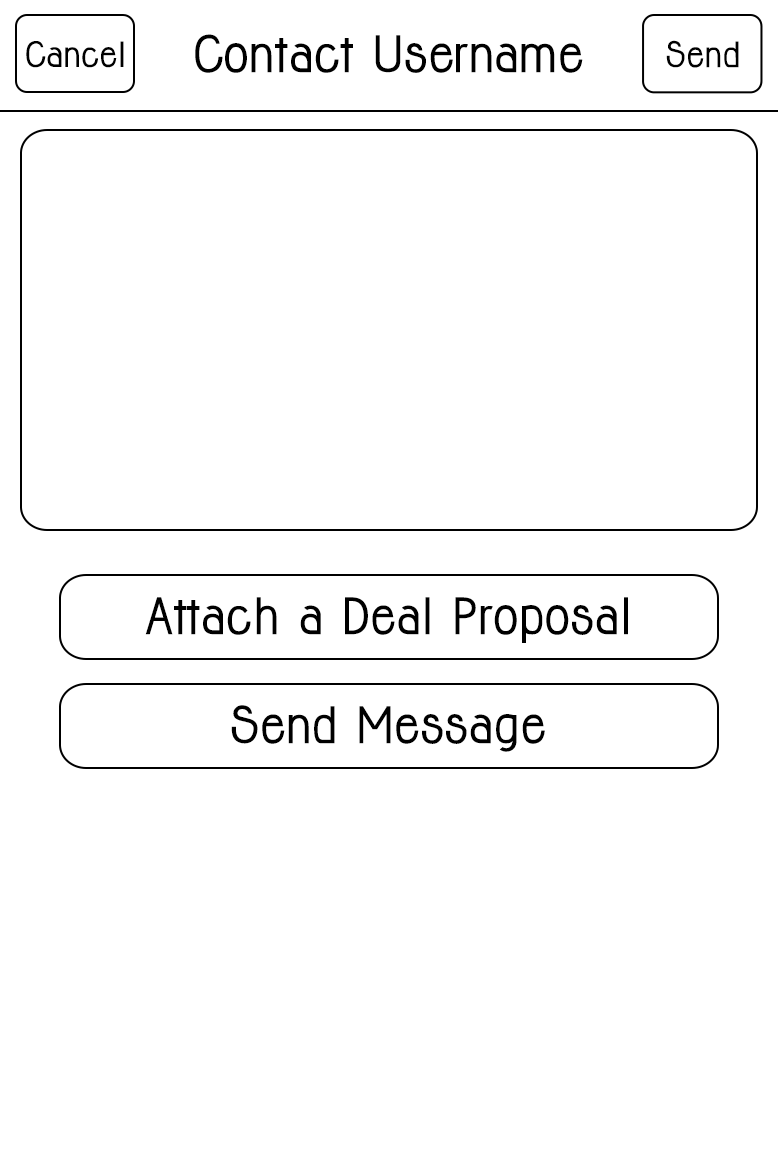
<style>
.page{position:relative;width:778px;height:1167px;background:#ffffff}
.page>*{position:absolute;margin:0}
.t1{font:32px "Jolly-Bold";color:#000000}
.t2{font:46.2px "Jolly-Bold";color:#000000}
.t3{font:32.1px "Jolly-Bold";color:#000000}
</style>
<div class="page">
<p class="t1" style="left:26px;top:41px;width:98px;height:27px">Cancel</p>
<p class="t2" style="left:195px;top:34px;width:388px;height:39px">Contact Username</p>
<p class="t3" style="left:666px;top:40px;width:73px;height:28px">Send</p>
<p class="t2" style="left:145px;top:597px;width:483px;height:46px">Attach a Deal Proposal</p>
<p class="t2" style="left:231px;top:705px;width:314px;height:47px">Send Message</p>
</div>
